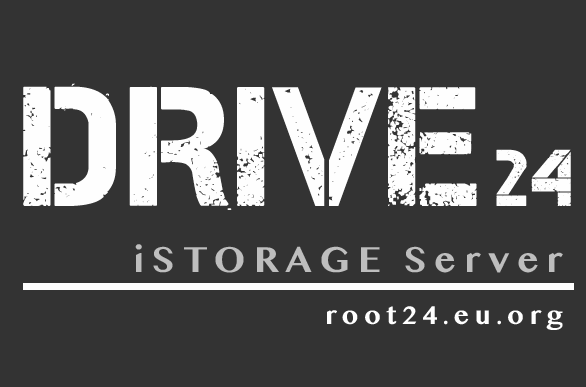
<style>
.page{position:relative;width:586px;height:387px;background:#333333}
.page>*{position:absolute;margin:0}
.t1{font:169.3px "Captureit";letter-spacing:0.03em;color:#fefefe}
.t2{font:80px "Captureit";letter-spacing:0.08em;color:#fefefe}
.t3{font:37.3px "SinhalaMN-Bold";letter-spacing:0.2em;color:#bebebe}
.t4{font:26.7px "SinhalaMN-Bold";letter-spacing:0.2em;color:#ffffff}
</style>
<div class="page">
<p class="t1" style="left:23px;top:83px;width:454px;height:127px">DRIVE</p>
<p class="t2" style="left:496px;top:149px;width:75px;height:57px">24</p>
<p class="t3" style="left:135px;top:244px;width:428px;height:29px">iSTORAGE Server</p>
<p class="t4" style="left:327px;top:306px;width:236px;height:24px">root24.eu.org</p>
</div>
